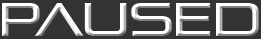
<style>
.page{position:relative;width:261px;height:39px;background:#333333}
.page>*{position:absolute;margin:0}
.t1{font:46.9px "PirulenRg-Regular";color:#ffffff}
</style>
<div class="page">
<p class="t1" style="left:2px;top:3px;width:257px;height:33px">PAUSED</p>
</div>
